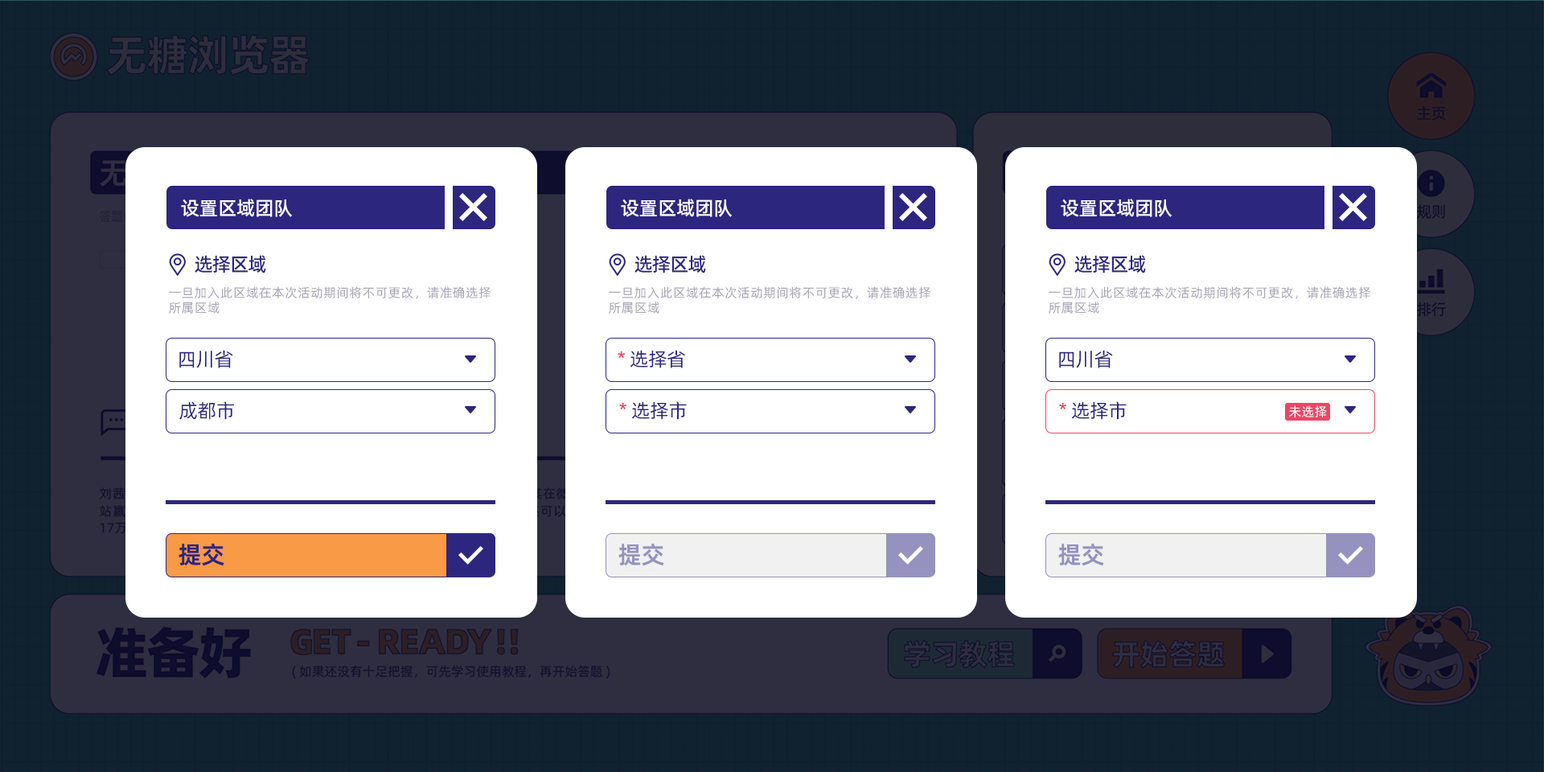
<style>
.page{position:relative;width:1544px;height:772px;background:#ffffff}
.page>*{position:absolute;margin:0}
.t1{font:19.3px "AlibabaPuHuiTi_2_65_Medium";letter-spacing:-0.02em;color:#ffffff}
.t2{font:19.3px "AlibabaPuHuiTi_2_65_Medium";letter-spacing:-0.06em;color:#2d267f}
.t3{font:12.9px/15.1px "AlibabaPuHuiTi_2_55_Regular";letter-spacing:0.02em;color:#a8a7b7}
.t4{font:19.3px "AlibabaPuHuiTi_2_55_Regular";letter-spacing:-0.02em;color:#2d267f}
.t5{font:19.3px "AlibabaPuHuiTi_2_55_Regular";letter-spacing:-0.02em;color:#ea4766}
.t6{font:12.9px "AlibabaPuHuiTi_2_55_Regular";letter-spacing:0.02em;color:#ffffff}
.t7{font:24.1px "AlibabaPuHuiTi_2_85_Bold";letter-spacing:-0.02em;color:#2d267f}
.t8{font:24.1px "AlibabaPuHuiTi_2_85_Bold";letter-spacing:-0.02em;color:#9692bf}
</style>
<div class="page">
<p class="t1" style="left:181px;top:199px;width:111px;height:18px">设置区域团队</p>
<p class="t1" style="left:621px;top:199px;width:111px;height:18px">设置区域团队</p>
<p class="t1" style="left:1061px;top:199px;width:111px;height:18px">设置区域团队</p>
<p class="t2" style="left:195px;top:255px;width:71px;height:18px">选择区域</p>
<p class="t2" style="left:635px;top:255px;width:71px;height:18px">选择区域</p>
<p class="t2" style="left:1075px;top:255px;width:71px;height:18px">选择区域</p>
<p class="t3" style="left:169px;top:286px;width:322px;height:28px">一旦加入此区域在本次活动期间将不可更改，请准确选择<br>所属区域</p>
<p class="t3" style="left:609px;top:286px;width:322px;height:28px">一旦加入此区域在本次活动期间将不可更改，请准确选择<br>所属区域</p>
<p class="t3" style="left:1049px;top:286px;width:322px;height:28px">一旦加入此区域在本次活动期间将不可更改，请准确选择<br>所属区域</p>
<p class="t4" style="left:179px;top:350px;width:54px;height:18px">四川省</p>
<p class="t4" style="left:618px;top:350px;width:67px;height:18px"><span class="t5">* </span>选择省</p>
<p class="t4" style="left:1059px;top:350px;width:54px;height:18px">四川省</p>
<p class="t4" style="left:179px;top:401px;width:55px;height:19px">成都市</p>
<p class="t4" style="left:619px;top:401px;width:68px;height:19px"><span class="t5">* </span>选择市</p>
<p class="t4" style="left:1059px;top:401px;width:68px;height:19px"><span class="t5">* </span>选择市</p>
<p class="t6" style="left:1289px;top:405px;width:38px;height:12px">未选择</p>
<p class="t7" style="left:179px;top:544px;width:45px;height:22px">提交</p>
<p class="t8" style="left:619px;top:544px;width:45px;height:22px">提交</p>
<p class="t8" style="left:1058px;top:544px;width:46px;height:22px">提交</p>
</div>
